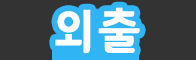
<style>
.page{position:relative;width:196px;height:60px;background:#333333}
.page>*{position:absolute;margin:0}
.t1{font:48px "12LotteMartHappyBold";letter-spacing:0.05em;color:#ffffff;text-transform:uppercase}
</style>
<div class="page">
<p class="t1" style="left:55px;top:7px;width:85px;height:47px">외출</p>
</div>
